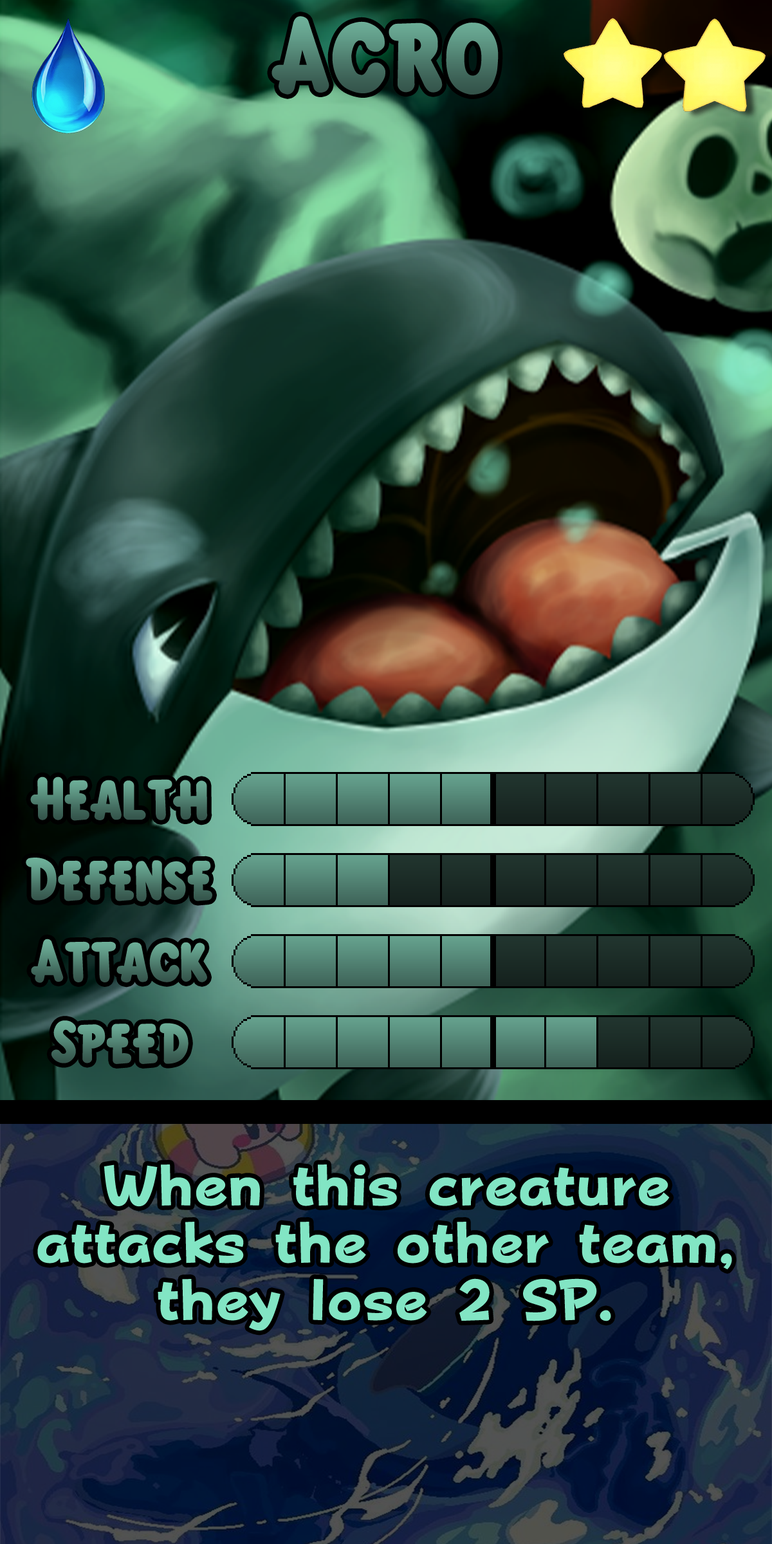
<style>
.page{position:relative;width:772px;height:1544px}
.page>*{position:absolute;margin:0}
.t1{font:166px "KirbyClassic"}
.t2{font:92.7px "KirbyClassic"}
.t3{font:97.8px/57.3px "FOTPopHappinessStrp-ExtraBold";color:#82e5c4}
</style>
<div class="page">
<p class="t1" style="left:272px;top:16px;width:227px;height:79px">Acro</p>
<p class="t2" style="left:30px;top:777px;width:178px;height:44px">Health</p>
<p class="t2" style="left:26px;top:858px;width:186px;height:44px">Defense</p>
<p class="t2" style="left:31px;top:939px;width:176px;height:44px">Attack</p>
<p class="t2" style="left:51px;top:1021px;width:138px;height:43px">Speed</p>
<p class="t3" style="left:37px;top:1164px;width:695px;height:167px;text-align:center">When this creature attacks the other team, they lose 2 SP.</p>
</div>
